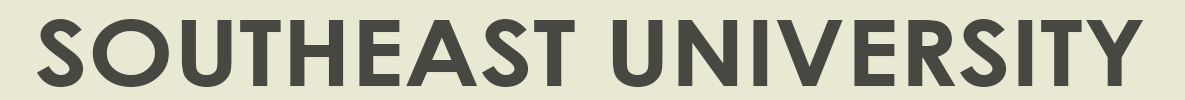
<style>
.page{position:relative;width:1185px;height:100px;background:#e9e9d3}
.page>*{position:absolute;margin:0}
.t1{font:91.8px "CenturyGothic-Bold";color:#484843;scale:1.11 1}
</style>
<div class="page">
<p class="t1" style="left:37px;top:19px;width:47px;height:68px">S</p>
<p class="t1" style="left:37px;top:19px;width:132px;height:68px">SO</p>
<p class="t1" style="left:37px;top:19px;width:195px;height:68px">SOU</p>
<p class="t1" style="left:37px;top:19px;width:244px;height:68px">SOUT</p>
<p class="t1" style="left:37px;top:19px;width:307px;height:68px">SOUTH</p>
<p class="t1" style="left:37px;top:19px;width:363px;height:68px">SOUTHE</p>
<p class="t1" style="left:37px;top:19px;width:441px;height:68px">SOUTHEA</p>
<p class="t1" style="left:37px;top:19px;width:492px;height:68px">SOUTHEAS</p>
<p class="t1" style="left:37px;top:19px;width:538px;height:68px">SOUTHEAST</p>
<p class="t1" style="left:37px;top:19px;width:538px;height:68px">SOUTHEAST</p>
<p class="t1" style="left:37px;top:19px;width:626px;height:68px">SOUTHEAST U</p>
<p class="t1" style="left:37px;top:19px;width:701px;height:68px">SOUTHEAST UN</p>
<p class="t1" style="left:37px;top:19px;width:731px;height:68px">SOUTHEAST UNI</p>
<p class="t1" style="left:37px;top:19px;width:806px;height:68px">SOUTHEAST UNIV</p>
<p class="t1" style="left:37px;top:19px;width:858px;height:68px">SOUTHEAST UNIVE</p>
<p class="t1" style="left:37px;top:19px;width:919px;height:68px">SOUTHEAST UNIVER</p>
<p class="t1" style="left:37px;top:19px;width:970px;height:68px">SOUTHEAST UNIVERS</p>
<p class="t1" style="left:37px;top:19px;width:996px;height:68px">SOUTHEAST UNIVERSI</p>
<p class="t1" style="left:37px;top:19px;width:1045px;height:68px">SOUTHEAST UNIVERSIT</p>
<p class="t1" style="left:37px;top:19px;width:1107px;height:68px">SOUTHEAST UNIVERSITY</p>
</div>
